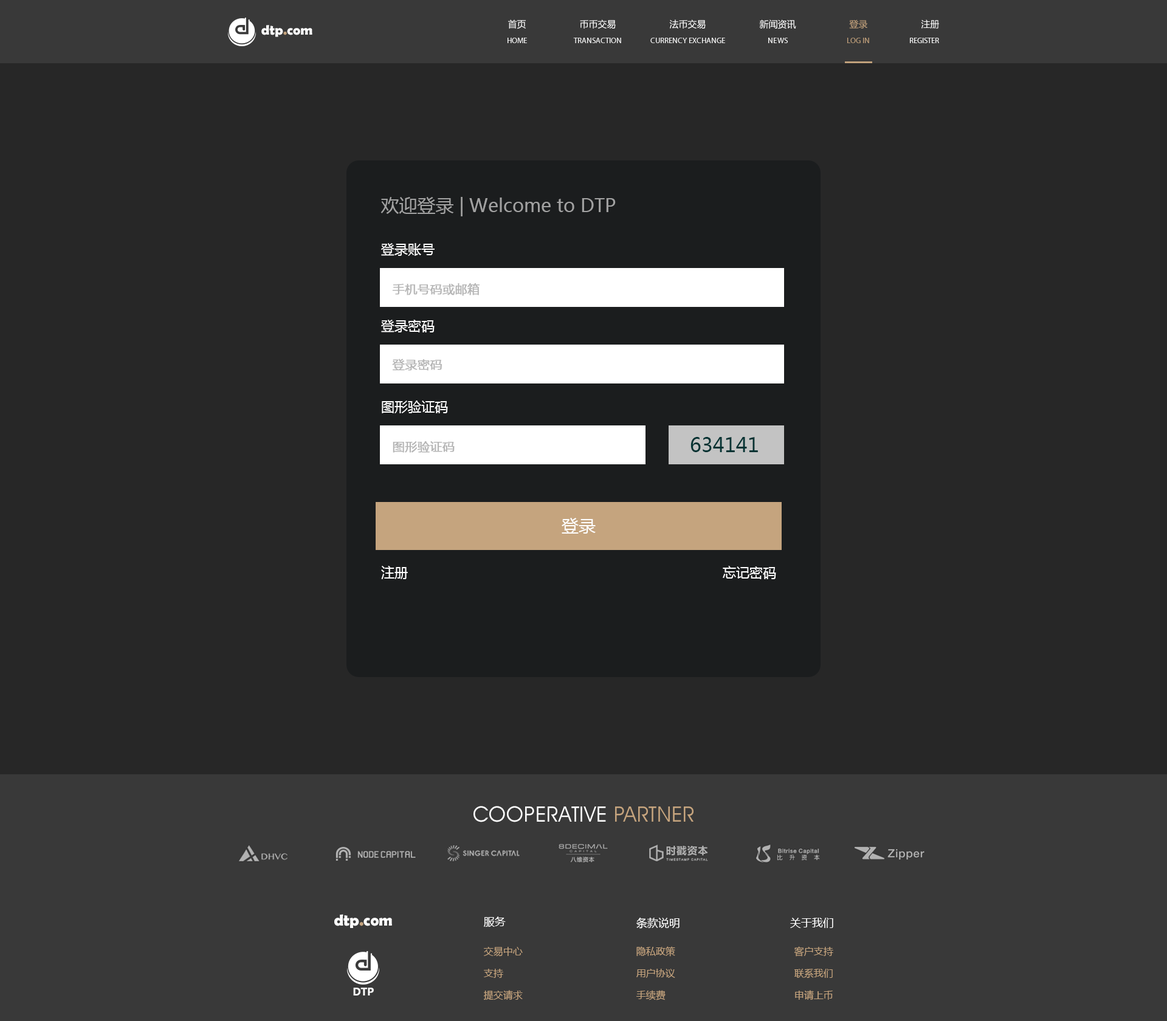
<style>
.page{position:relative;width:1167px;height:1021px;background:#272727}
.page>*{position:absolute;margin:0}
.t1{font:13.7px "BerlinSansFBDemi-Bold";color:#ffffff}
.t2{font:13.7px "BerlinSansFBDemi-Bold";color:#c5a47e}
.t3{font:9.1px "MicrosoftYaHei";color:#ffffff}
.t4{font:9.1px "MicrosoftYaHei";color:#c5a47e}
.t5{font:7.9px "MyriadPro-Regular";color:#ffffff;text-transform:uppercase}
.t6{font:7.9px "MyriadPro-Regular";color:#c5a47e;text-transform:uppercase}
.t7{font:18.2px "MicrosoftYaHei";color:#a2a2a2}
.t8{font:13.4px "MicrosoftYaHei";color:#ffffff}
.t9{font:12.2px "MicrosoftYaHei";color:#b6b6b6;font-weight:bold}
.t10{font:19.7px "MicrosoftYaHei";color:#033333}
.t11{font:17px "MicrosoftYaHei";color:#ffffff}
.t12{font:21.3px "AvantGardeITCbyBT-Book";letter-spacing:0.02em;color:#ffffff;text-transform:uppercase}
.t13{font:21.3px "AvantGardeITCbyBT-Book";letter-spacing:0.02em;color:#c5a47e;text-transform:uppercase}
.t14{font:15.9px "BerlinSansFBDemi-Bold";color:#ffffff}
.t15{font:15.9px "BerlinSansFBDemi-Bold";color:#c5a47e}
.t16{font:10.9px "MicrosoftYaHei";color:#ffffff}
.t17{font:9.7px "MicrosoftYaHei";color:#c5a47e}
.t18{font:11.1px "Ebrima-Bold";color:#ffffff}
</style>
<div class="page">
<p class="t1" style="left:261px;top:25px;width:52px;height:12px">dtp<span class="t2">.</span>com</p>
<p class="t3" style="left:508px;top:19px;width:431px;height:10px">首页                      币币交易                      法币交易                      新闻资讯                      <span class="t4">登录</span>                      注册</p>
<p class="t5" style="left:508px;top:38px;width:19px;height:5px">home</p>
<p class="t5" style="left:573px;top:38px;width:48px;height:5px">transaction</p>
<p class="t5" style="left:651px;top:38px;width:74px;height:5px">Currency exchange</p>
<p class="t5" style="left:769px;top:38px;width:19px;height:5px">News</p>
<p class="t6" style="left:848px;top:38px;width:21px;height:5px">log in</p>
<p class="t5" style="left:910px;top:38px;width:29px;height:5px">register</p>
<p class="t7" style="left:381px;top:197px;width:235px;height:19px">欢迎登录 | Welcome to DTP</p>
<p class="t8" style="left:381px;top:243px;width:54px;height:13px">登录账号</p>
<p class="t9" style="left:392px;top:283px;width:88px;height:13px">手机号码或邮箱</p>
<p class="t8" style="left:381px;top:320px;width:54px;height:13px">登录密码</p>
<p class="t9" style="left:392px;top:359px;width:50px;height:12px">登录密码</p>
<p class="t8" style="left:382px;top:401px;width:66px;height:12px">图形验证码</p>
<p class="t10" style="left:691px;top:437px;width:67px;height:15px">634141</p>
<p class="t9" style="left:393px;top:441px;width:62px;height:12px">图形验证码</p>
<p class="t11" style="left:562px;top:518px;width:34px;height:16px">登录</p>
<p class="t8" style="left:381px;top:566px;width:27px;height:13px">注册</p>
<p class="t8" style="left:723px;top:566px;width:53px;height:13px">忘记密码</p>
<p class="t12" style="left:474px;top:806px;width:220px;height:17px">Cooperative <span class="t13">partner</span></p>
<p class="t14" style="left:334px;top:914px;width:58px;height:14px">dtp<span class="t15">.</span>com</p>
<p class="t16" style="left:484px;top:917px;width:22px;height:10px">服务</p>
<p class="t16" style="left:637px;top:917px;width:43px;height:12px">条款说明</p>
<p class="t16" style="left:790px;top:918px;width:44px;height:10px">关于我们</p>
<p class="t17" style="left:484px;top:947px;width:39px;height:10px">交易中心</p>
<p class="t17" style="left:637px;top:947px;width:39px;height:10px">隐私政策</p>
<p class="t17" style="left:794px;top:947px;width:40px;height:10px">客户支持</p>
<p class="t17" style="left:484px;top:969px;width:19px;height:9px">支持</p>
<p class="t17" style="left:637px;top:969px;width:39px;height:9px">用户协议</p>
<p class="t17" style="left:795px;top:969px;width:38px;height:10px">联系我们</p>
<p class="t18" style="left:353px;top:988px;width:21px;height:8px">DTP</p>
<p class="t17" style="left:484px;top:990px;width:39px;height:11px">提交请求</p>
<p class="t17" style="left:637px;top:990px;width:29px;height:11px">手续费</p>
<p class="t17" style="left:795px;top:990px;width:38px;height:10px">申请上币</p>
</div>
